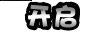
<style>
.page{position:relative;width:104px;height:32px;background:#ffffff}
.page>*{position:absolute;margin:0}
.t1{font:25.3px "DFPHaiBaoW12";letter-spacing:0.05em}
</style>
<div class="page">
<p class="t1" style="left:27px;top:4px;width:50px;height:24px">开启</p>
</div>
